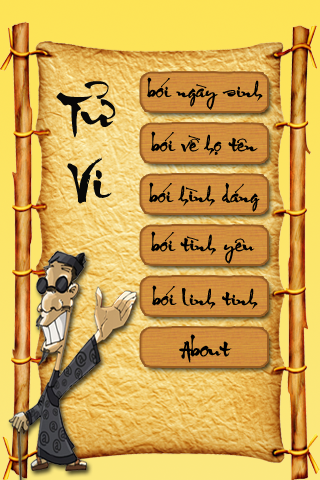
<style>
.page{position:relative;width:320px;height:480px}
.page>*{position:absolute;margin:0}
.t1{font:20.4px "HLOngDo";color:#000000}
.t2{font:54.3px "HLOngDo";color:#080808}
.t3{font:22.6px "HLOngDo";color:#000000}
</style>
<div class="page">
<p class="t1" style="left:147px;top:77px;width:116px;height:33px">bói ngày sinh</p>
<p class="t2" style="left:56px;top:81px;width:60px;height:57px">Tử</p>
<p class="t1" style="left:151px;top:131px;width:107px;height:25px">bói về họ tên</p>
<p class="t2" style="left:67px;top:157px;width:45px;height:47px">Vi</p>
<p class="t1" style="left:149px;top:182px;width:111px;height:30px">bói hình dáng</p>
<p class="t1" style="left:151px;top:231px;width:104px;height:33px">bói tình yêu</p>
<p class="t1" style="left:152px;top:285px;width:106px;height:25px">bói linh tinh</p>
<p class="t3" style="left:179px;top:334px;width:53px;height:29px">About</p>
</div>
